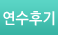
<style>
.page{position:relative;width:58px;height:35px}
.page>*{position:absolute;margin:0}
.t1{font:15px "NanumGothicBold";color:#ffffff;scale:0.95 1}
</style>
<div class="page">
<p class="t1" style="left:3px;top:11px;width:52px;height:15px">연수후기</p>
</div>
